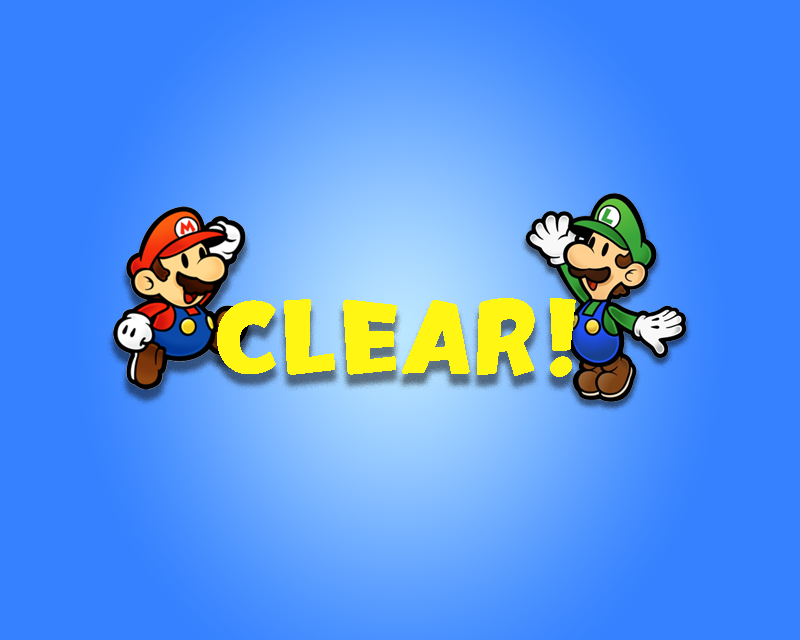
<style>
.page{position:relative;width:800px;height:640px;background:#3581ff}
.page>*{position:absolute;margin:0}
.t1{font:91.4px "KoreanPKS-R";letter-spacing:0.05em;color:#fff713}
</style>
<div class="page">
<p class="t1" style="left:217px;top:298px;width:359px;height:79px">CLEAR!</p>
</div>
